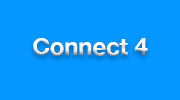
<style>
.page{position:relative;width:180px;height:100px;background:#0397ff}
.page>*{position:absolute;margin:0}
.t1{font:24px "HelveticaNeue-Bold";color:#ffffff}
</style>
<div class="page">
<p class="t1" style="left:33px;top:38px;width:115px;height:18px">Connect 4</p>
</div>
